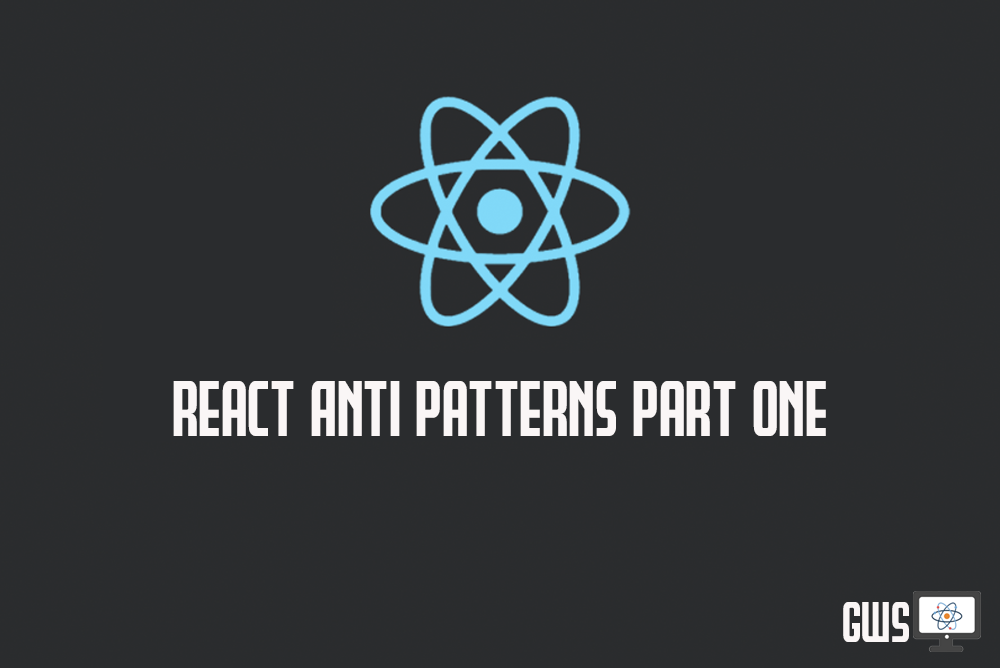
<style>
.page{position:relative;width:1000px;height:668px;background:#2a2c2e}
.page>*{position:absolute;margin:0}
.t1{font:75px "Peace&Houston";color:#faf6f6}
.t2{font:54.6px "Peace&Houston";color:#faf6f6}
</style>
<div class="page">
<p class="t1" style="left:173px;top:381px;width:653px;height:55px">React Anti Patterns Part One</p>
<p class="t2" style="left:843px;top:602px;width:66px;height:40px">GWS</p>
</div>
